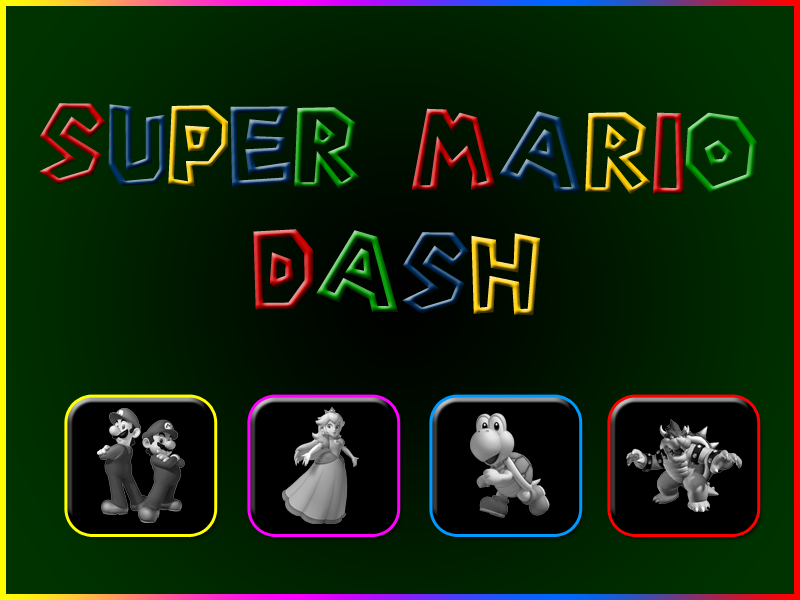
<style>
.page{position:relative;width:800px;height:600px}
.page>*{position:absolute;margin:0}
.t1{font:102.3px "Super-Mario-Bros.-Regular"}
</style>
<div class="page">
<p class="t1" style="left:39px;top:103px;width:718px;height:212px;text-align:center;rotate:1deg">SUPER MARIO<br>DASH</p>
</div>
